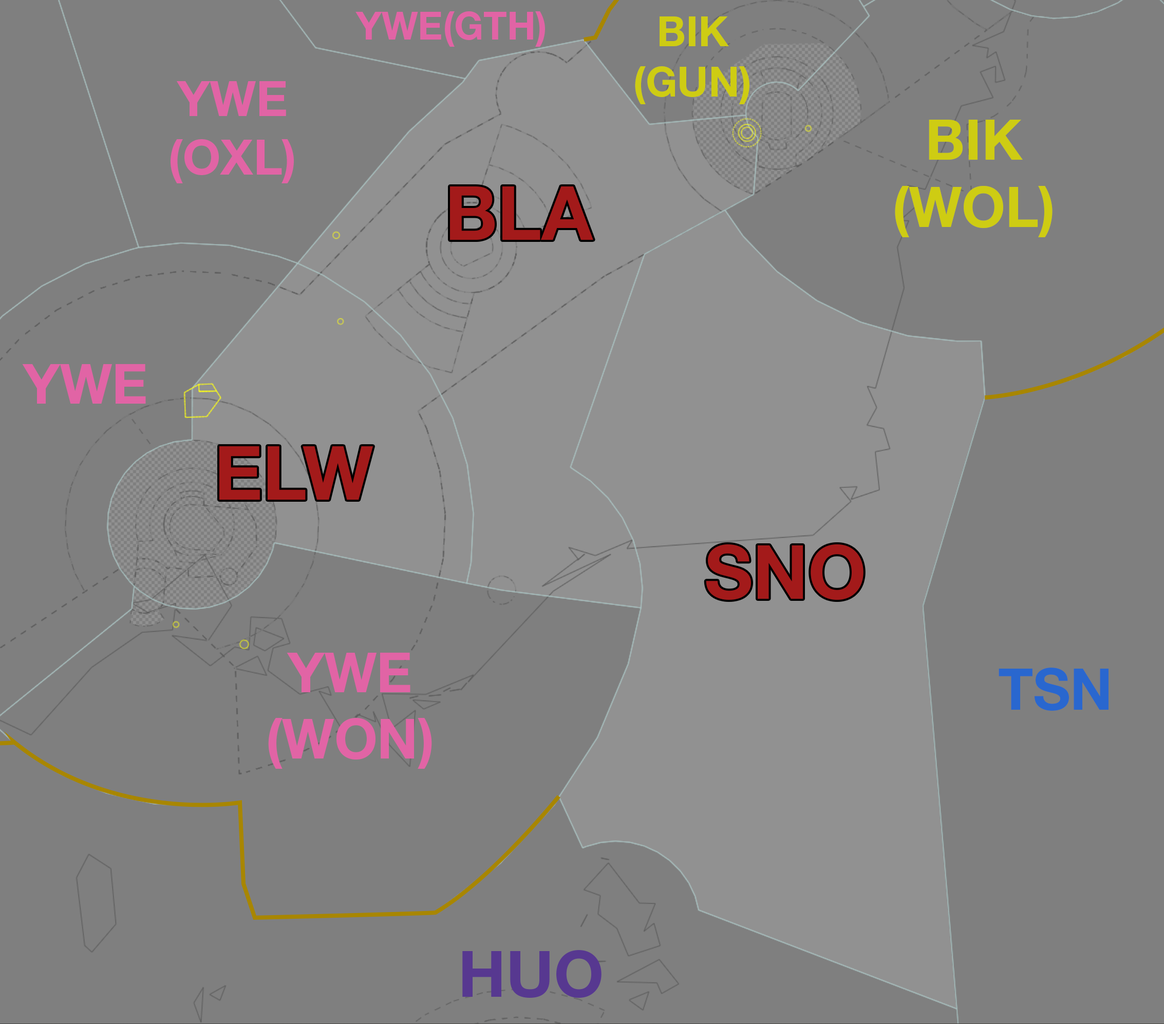
<style>
.page{position:relative;width:1164px;height:1024px;background:#7f7f7f}
.page>*{position:absolute;margin:0}
.t1{font:38.5px "HelveticaNeueLTStd-Bd";color:#e164a5}
.t2{font:41.9px "HelveticaNeueLTStd-Bd";color:#cecc13}
.t3{font:49px "HelveticaNeueLTStd-Bd";color:#e164a5}
.t4{font:56.2px "HelveticaNeueLTStd-Bd";color:#cecc13}
.t5{font:74.8px "HelveticaNeueLTStd-Bd";color:#a31a1a}
.t6{font:55.3px "HelveticaNeueLTStd-Bd";color:#e164a5}
.t7{font:57.3px "HelveticaNeueLTStd-Bd";color:#2967cf}
.t8{font:64.4px "HelveticaNeueLTStd-Bd";color:#573890}
</style>
<div class="page">
<p class="t1" style="left:355px;top:11px;width:190px;height:36px">YWE(GTH)</p>
<p class="t2" style="left:635px;top:16px;width:115px;height:88px;text-align:center">BIK<br>(GUN)</p>
<p class="t3" style="left:171px;top:81px;width:123px;height:102px;text-align:center">YWE<br>(OXL)</p>
<p class="t4" style="left:895px;top:120px;width:158px;height:117px;text-align:center">BIK<br>(WOL)</p>
<p class="t5" style="left:450px;top:186px;width:143px;height:54px">BLA</p>
<p class="t6" style="left:22px;top:364px;width:124px;height:40px">YWE</p>
<p class="t5" style="left:219px;top:446px;width:154px;height:54px">ELW</p>
<p class="t5" style="left:706px;top:544px;width:158px;height:56px">SNO</p>
<p class="t6" style="left:268px;top:652px;width:164px;height:117px;text-align:center">YWE<br>(WON)</p>
<p class="t7" style="left:999px;top:668px;width:110px;height:43px">TSN</p>
<p class="t8" style="left:462px;top:950px;width:140px;height:48px">HUO</p>
</div>
